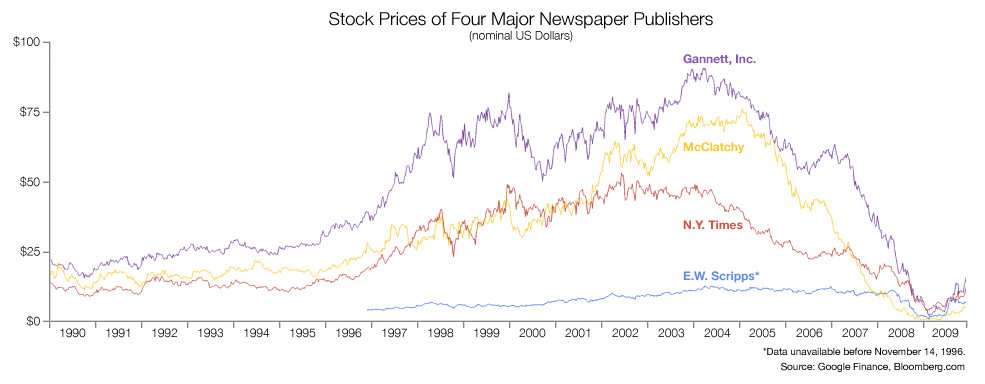
<style>
.page{position:relative;width:985px;height:384px;background:#ffffff}
.page>*{position:absolute;margin:0}
.t1{font:18px "HelveticaNeue-Light";color:#000000}
.t2{font:12px "HelveticaNeue-Light";color:#000000}
.t3{font:12px "HelveticaNeue-Light"}
.t4{font:12px "HelveticaNeue-Bold";color:#8856a8}
.t5{font:12px "HelveticaNeue-Bold";color:#f7c82c}
.t6{font:12px "HelveticaNeue-Bold";color:#ca5645}
.t7{font:12px "HelveticaNeue-Bold";color:#648ae9}
.t8{font:10px "HelveticaNeue";color:#000000}
</style>
<div class="page">
<p class="t1" style="left:329px;top:12px;width:384px;height:30px;text-align:center">Stock Prices of Four Major Newspaper Publishers<br><span class="t2">(nominal US Dollars)</span></p>
<p class="t3" style="left:13px;top:36px;width:27px;height:11px">$100</p>
<p class="t4" style="left:683px;top:54px;width:73px;height:11px">Gannett, Inc.</p>
<p class="t3" style="left:20px;top:106px;width:20px;height:12px">$75</p>
<p class="t5" style="left:683px;top:142px;width:62px;height:12px">McClatchy</p>
<p class="t3" style="left:20px;top:176px;width:20px;height:12px">$50</p>
<p class="t6" style="left:683px;top:220px;width:60px;height:10px">N.Y. Times</p>
<p class="t3" style="left:20px;top:245px;width:20px;height:12px">$25</p>
<p class="t7" style="left:683px;top:271px;width:77px;height:12px">E.W. Scripps*</p>
<p class="t3" style="left:27px;top:315px;width:13px;height:12px">$0</p>
<p class="t2" style="left:60px;top:328px;width:26px;height:10px">1990</p>
<p class="t2" style="left:106px;top:328px;width:24px;height:10px">1991</p>
<p class="t2" style="left:152px;top:328px;width:25px;height:10px">1992</p>
<p class="t2" style="left:198px;top:328px;width:25px;height:10px">1993</p>
<p class="t2" style="left:244px;top:328px;width:26px;height:10px">1994</p>
<p class="t2" style="left:290px;top:328px;width:26px;height:10px">1995</p>
<p class="t2" style="left:336px;top:328px;width:26px;height:10px">1996</p>
<p class="t2" style="left:382px;top:328px;width:25px;height:10px">1997</p>
<p class="t2" style="left:428px;top:328px;width:26px;height:10px">1998</p>
<p class="t2" style="left:474px;top:328px;width:26px;height:10px">1999</p>
<p class="t3" style="left:519px;top:328px;width:27px;height:10px">2000</p>
<p class="t3" style="left:565px;top:328px;width:25px;height:10px">2001</p>
<p class="t3" style="left:612px;top:328px;width:26px;height:10px">2002</p>
<p class="t3" style="left:658px;top:328px;width:26px;height:10px">2003</p>
<p class="t2" style="left:704px;top:328px;width:27px;height:10px">2004</p>
<p class="t3" style="left:749px;top:328px;width:27px;height:10px">2005</p>
<p class="t3" style="left:796px;top:328px;width:27px;height:10px">2006</p>
<p class="t3" style="left:842px;top:328px;width:26px;height:10px">2007</p>
<p class="t3" style="left:888px;top:328px;width:27px;height:10px">2008</p>
<p class="t3" style="left:932px;top:328px;width:27px;height:10px">2009</p>
<p class="t8" style="left:763px;top:347px;width:202px;height:10px">*Data unavailable before November 14, 1996.</p>
<p class="t8" style="left:781px;top:362px;width:184px;height:10px">Source: Google Finance, Bloomberg.com</p>
</div>
